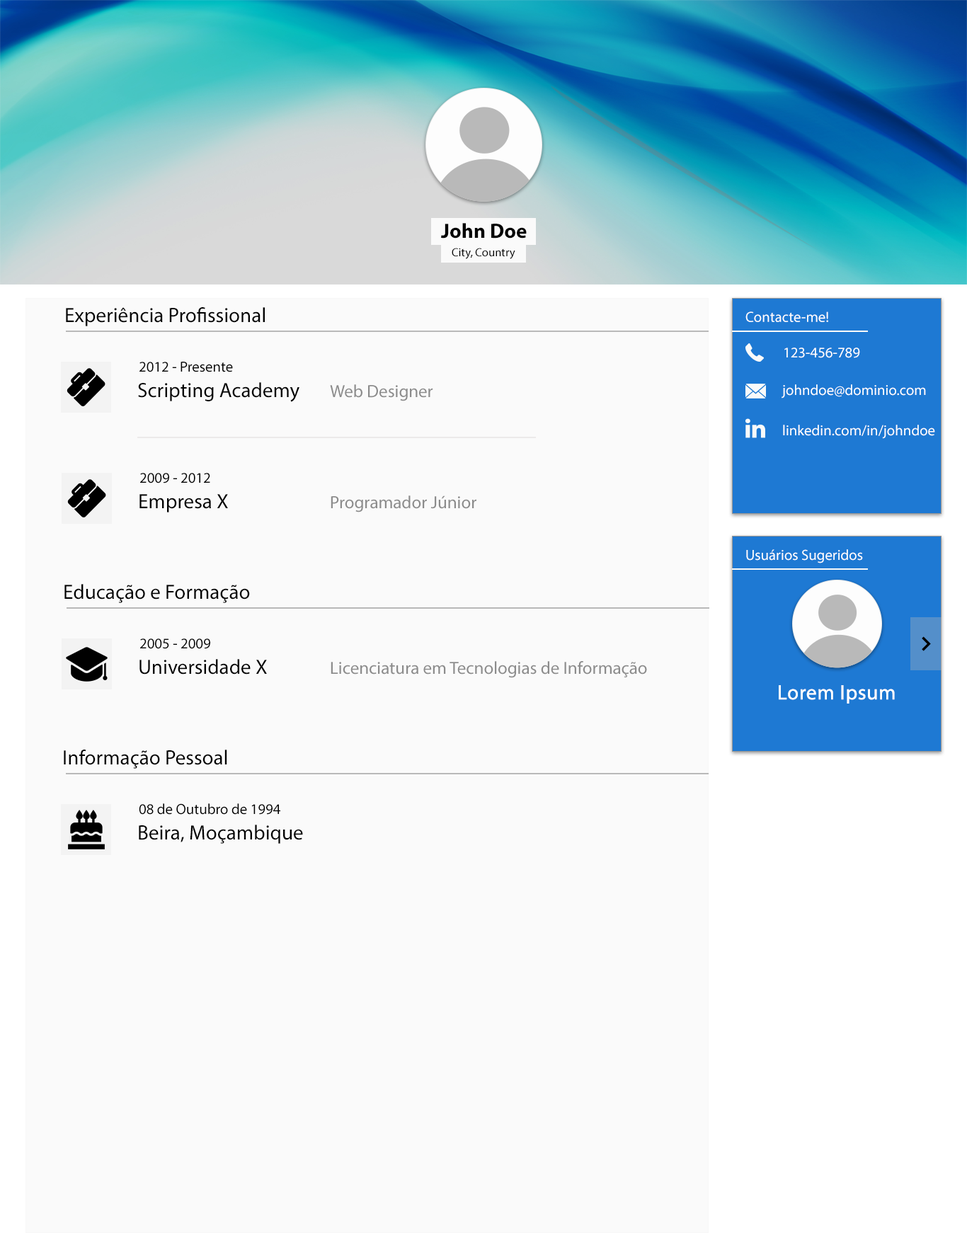
<style>
.page{position:relative;width:967px;height:1233px;background:#fafafa}
.page>*{position:absolute;margin:0}
.t1{font:20.6px "MyriadPro-Bold";color:#000000}
.t2{font:11.8px "MyriadPro-Regular";color:#000000}
.t3{font:20.6px "MyriadPro-Regular";color:#000000}
.t4{font:14.7px "MyriadPro-Regular";color:#ffffff}
.t5{font:14.7px "MyriadPro-Regular";color:#000000}
.t6{font:17.7px "MyriadPro-Regular";color:#8c8c8c}
.t7{font:20.6px "MyriadPro-Regular";color:#ffffff;font-weight:bold}
</style>
<div class="page">
<p class="t1" style="left:441px;top:223px;width:86px;height:16px">John Doe</p>
<p class="t2" style="left:452px;top:248px;width:63px;height:11px">City, Country</p>
<p class="t3" style="left:66px;top:307px;width:199px;height:19px">Experiência Profissional</p>
<p class="t4" style="left:745px;top:311px;width:83px;height:11px">Contacte-me!</p>
<p class="t4" style="left:784px;top:348px;width:76px;height:10px">123-456-789</p>
<p class="t5" style="left:139px;top:362px;width:94px;height:10px">2012 - Presente</p>
<p class="t3" style="left:138px;top:382px;width:161px;height:20px">Scripting Academy</p>
<p class="t6" style="left:330px;top:384px;width:103px;height:17px">Web Designer</p>
<p class="t4" style="left:782px;top:384px;width:144px;height:15px">johndoe@dominio.com</p>
<p class="t4" style="left:783px;top:425px;width:152px;height:14px">linkedin.com/in/johndoe</p>
<p class="t5" style="left:140px;top:473px;width:70px;height:10px">2009 - 2012</p>
<p class="t3" style="left:139px;top:494px;width:89px;height:19px">Empresa X</p>
<p class="t6" style="left:331px;top:496px;width:145px;height:17px">Programador Júnior</p>
<p class="t4" style="left:746px;top:549px;width:117px;height:14px">Usuários Sugeridos</p>
<p class="t3" style="left:64px;top:584px;width:186px;height:19px">Educação e Formação</p>
<p class="t5" style="left:140px;top:639px;width:70px;height:10px">2005 - 2009</p>
<p class="t3" style="left:139px;top:659px;width:128px;height:16px">Universidade X</p>
<p class="t6" style="left:331px;top:661px;width:316px;height:17px">Licenciatura em Tecnologias de Informação</p>
<p class="t7" style="left:779px;top:685px;width:116px;height:19px">Lorem Ipsum</p>
<p class="t3" style="left:64px;top:750px;width:163px;height:19px">Informação Pessoal</p>
<p class="t5" style="left:139px;top:803px;width:141px;height:12px">08 de Outubro de 1994</p>
<p class="t3" style="left:139px;top:825px;width:164px;height:19px">Beira, Moçambique</p>
</div>
